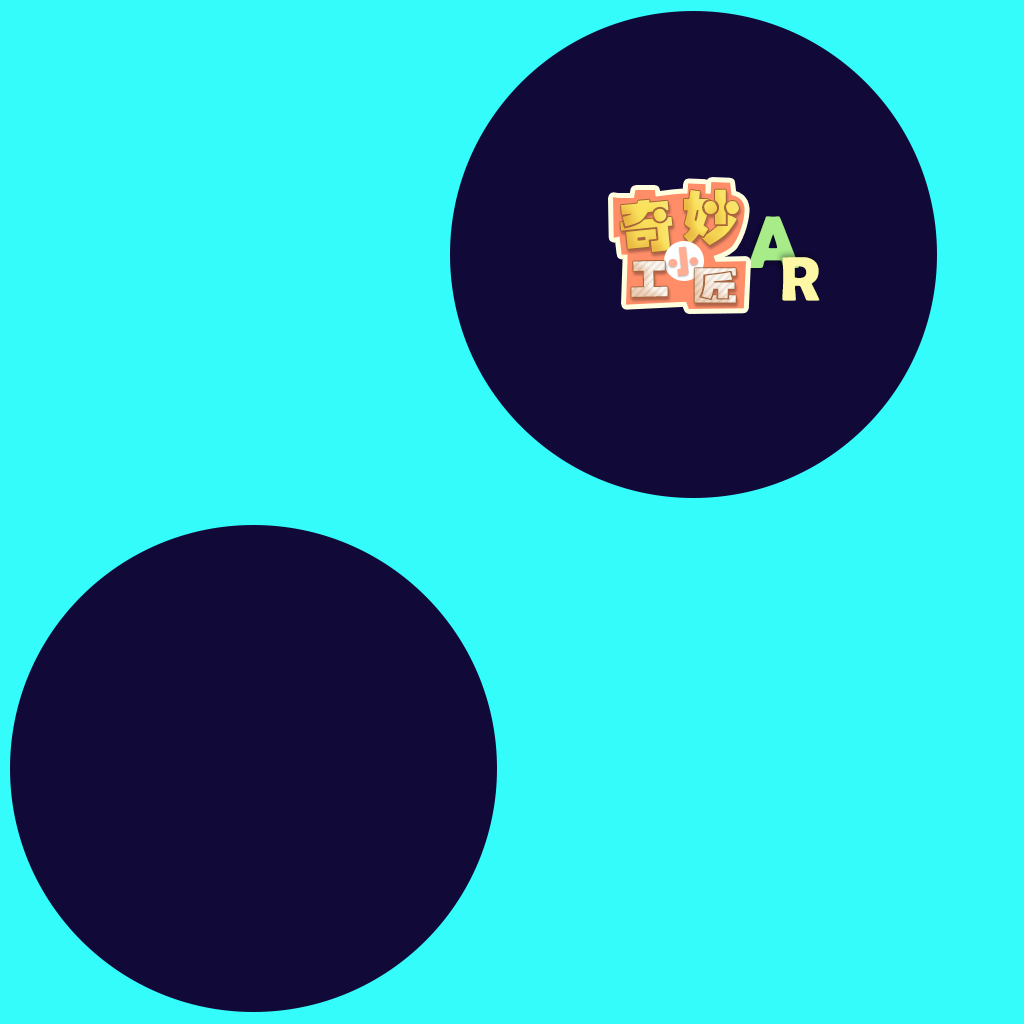
<style>
.page{position:relative;width:1024px;height:1024px;background:#34fcfa}
.page>*{position:absolute;margin:0}
.t1{font:58.6px "HYb8gf";color:#f6d956}
.t2{font:57px "HYb8gf";color:#f7da57}
.t3{font:73.9px "BerlinSansFBDemi-Bold";letter-spacing:-0.05em;color:#a7ec89}
.t4{font:31.4px "HYb8gf";color:#ffae94;scale:1.07 1}
.t5{font:62.8px "BerlinSansFBDemi-Bold";letter-spacing:-0.05em;color:#fef7a5}
.t6{font:40.6px "HYb8gf"}
.t7{font:39px "HYb8gf";scale:1.24 1}
</style>
<div class="page">
<p class="t1" style="left:683px;top:189px;width:56px;height:56px">妙</p>
<p class="t2" style="left:620px;top:199px;width:53px;height:53px;rotate:-6deg">奇</p>
<p class="t3" style="left:748px;top:216px;width:51px;height:52px">A</p>
<p class="t4" style="left:668px;top:246px;width:31px;height:30px;rotate:-6deg">小</p>
<p class="t5" style="left:782px;top:257px;width:38px;height:44px">R</p>
<p class="t6" style="left:631px;top:261px;width:37px;height:36px;rotate:-1deg">工</p>
<p class="t7" style="left:694px;top:268px;width:42px;height:35px">匠</p>
</div>
